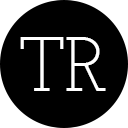
<style>
.page{position:relative;width:128px;height:128px;background:#000000}
.page>*{position:absolute;margin:0}
.t1{font:76.9px "JosefinSlab";color:#ffffff}
</style>
<div class="page">
<p class="t1" style="left:20px;top:37px;width:86px;height:54px">TR</p>
</div>
